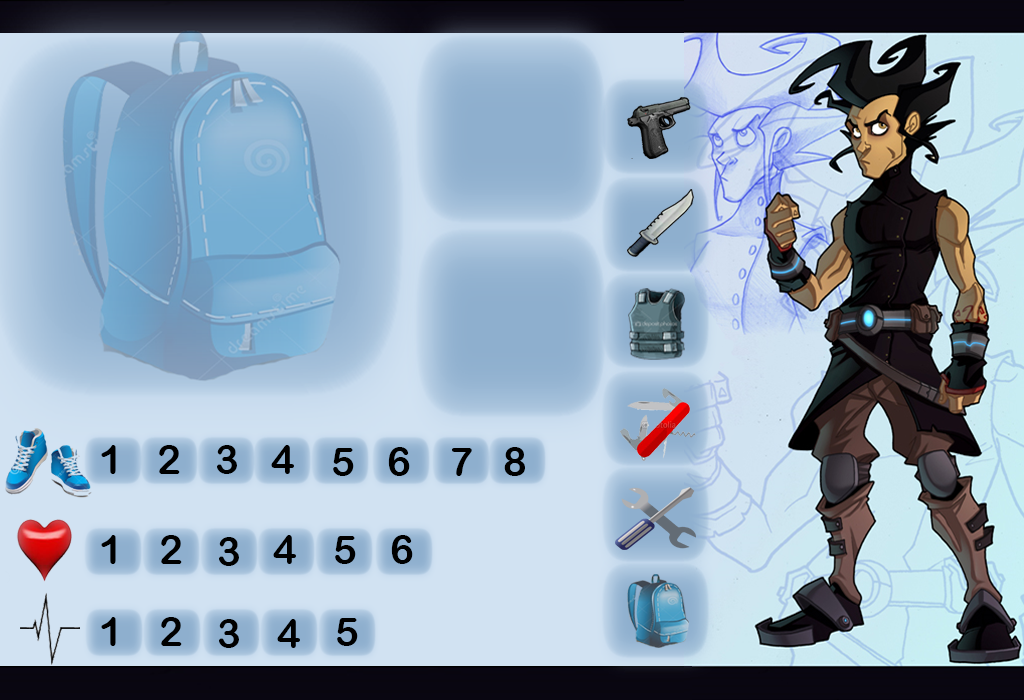
<style>
.page{position:relative;width:1024px;height:700px}
.page>*{position:absolute;margin:0}
.t1{font:40px "ArialRoundedMTBold";color:#000000}
</style>
<div class="page">
<p class="t1" style="left:101px;top:445px;width:15px;height:29px">1</p>
<p class="t1" style="left:159px;top:445px;width:21px;height:29px">2</p>
<p class="t1" style="left:217px;top:445px;width:20px;height:29px">3</p>
<p class="t1" style="left:271px;top:445px;width:23px;height:29px">4</p>
<p class="t1" style="left:333px;top:448px;width:21px;height:28px">5</p>
<p class="t1" style="left:388px;top:447px;width:22px;height:29px">6</p>
<p class="t1" style="left:452px;top:448px;width:20px;height:28px">7</p>
<p class="t1" style="left:504px;top:447px;width:21px;height:29px">8</p>
<p class="t1" style="left:101px;top:535px;width:15px;height:29px">1</p>
<p class="t1" style="left:161px;top:535px;width:21px;height:29px">2</p>
<p class="t1" style="left:219px;top:537px;width:20px;height:29px">3</p>
<p class="t1" style="left:273px;top:535px;width:23px;height:29px">4</p>
<p class="t1" style="left:335px;top:536px;width:21px;height:28px">5</p>
<p class="t1" style="left:391px;top:535px;width:22px;height:29px">6</p>
<p class="t1" style="left:101px;top:617px;width:15px;height:29px">1</p>
<p class="t1" style="left:161px;top:617px;width:21px;height:29px">2</p>
<p class="t1" style="left:219px;top:619px;width:20px;height:29px">3</p>
<p class="t1" style="left:277px;top:619px;width:23px;height:29px">4</p>
<p class="t1" style="left:337px;top:618px;width:21px;height:28px">5</p>
</div>
